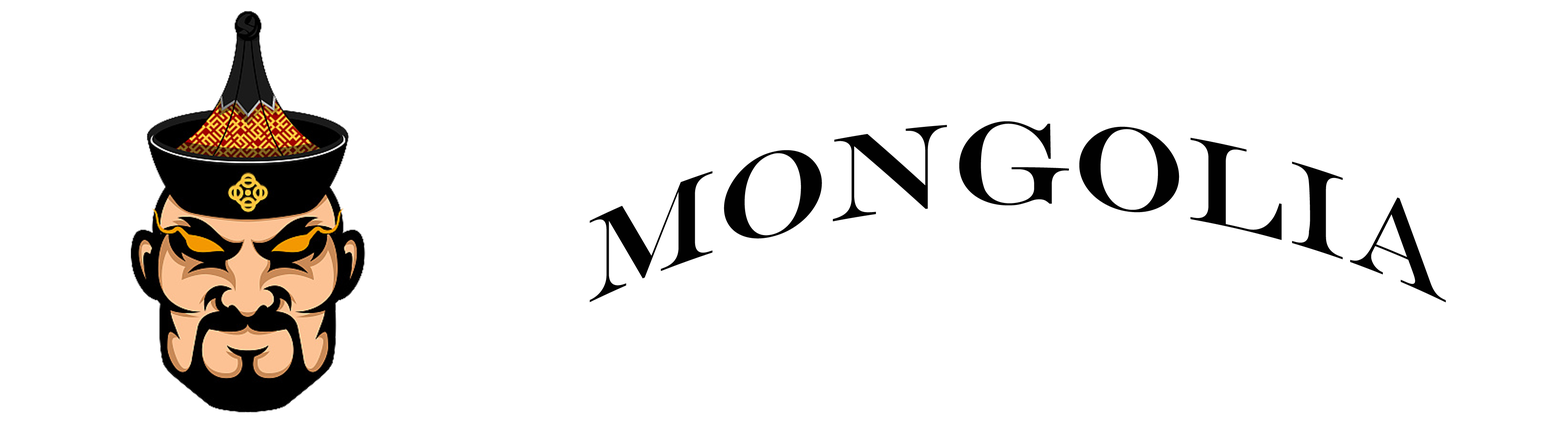
<style>
.page{position:relative;width:1568px;height:423px;background:#ffffff}
.page>*{position:absolute;margin:0}
.t1{font:119px "EngraversMT";color:#010101}
</style>
<div class="page">
<p class="t1" style="left:590px;top:121px;width:856px;height:182px">mongolia</p>
</div>
